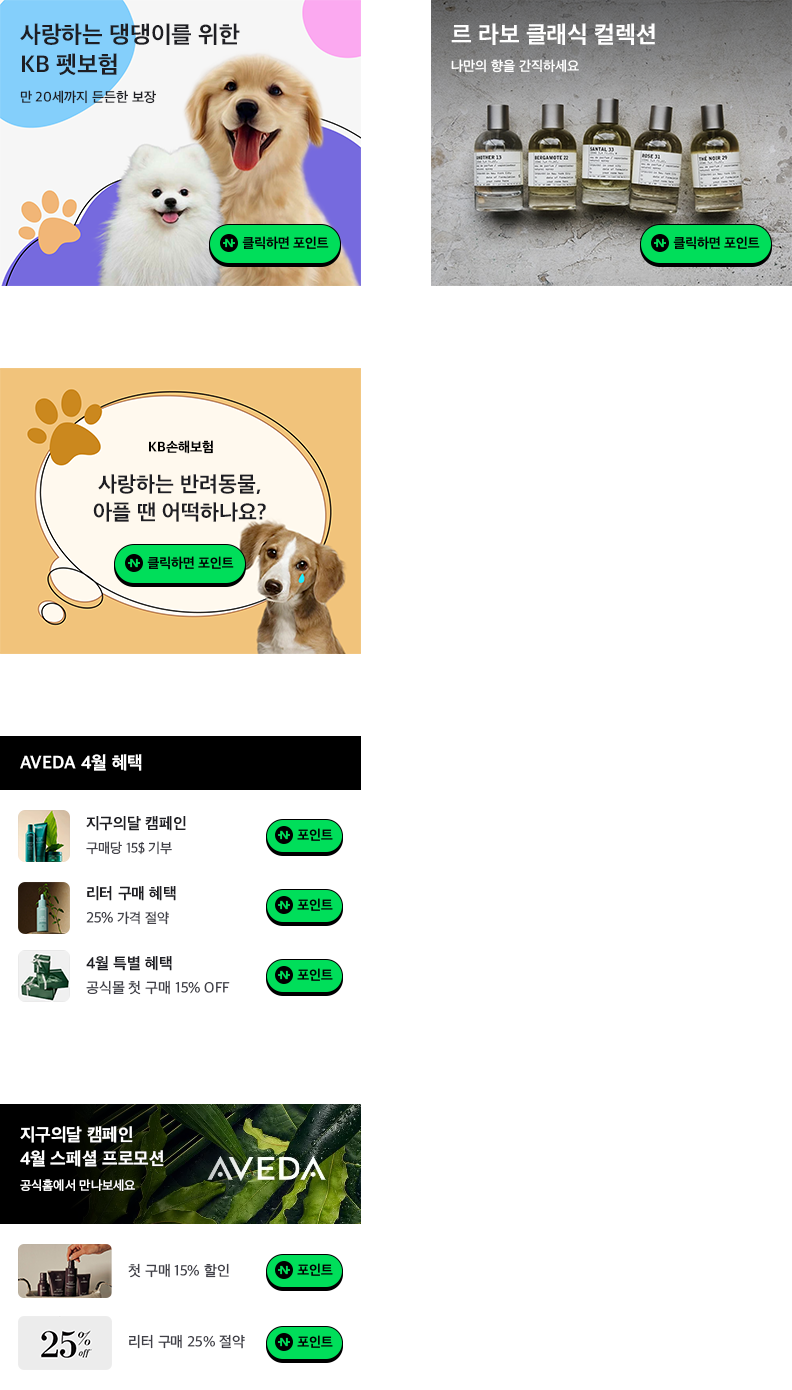
<style>
.page{position:relative;width:792px;height:1390px;background:#ffffff}
.page>*{position:absolute;margin:0}
.t1{font:24px/30px "AppleSDGothicNeo-Bold";color:#1e1e23}
.t2{font:24px "AppleSDGothicNeo-Bold";color:#ffffff}
.t3{font:14px "AppleSDGothicNeo-Medium";color:#ffffff}
.t4{font:14px "AppleSDGothicNeo-Medium";color:#1e1e23}
.t5{font:14px "AppleSDGothicNeo-Bold";color:#000000}
.t6{font:22px/28px "AppleSDGothicNeo-Bold";color:#1e1e23}
.t7{font:18px "AppleSDGothicNeo-Bold";color:#ffffff}
.t8{font:16px "AppleSDGothicNeo-Bold";color:#1e1e23}
.t9{font:14px "AppleSDGothicNeo-Regular";color:#404048}
.t10{font:15px "AppleSDGothicNeo-Regular";color:#404048}
.t11{font:18px/24px "AppleSDGothicNeo-Bold";color:#ffffff}
.t12{font:13px "AppleSDGothicNeo-Medium";color:#ffffff}
.t13{font:15px "AppleSDGothicNeo-Medium";color:#404048}
</style>
<div class="page">
<p class="t1" style="left:20px;top:23px;width:220px;height:52px">사랑하는 댕댕이를 위한<br>KB 펫보험</p>
<p class="t2" style="left:451px;top:23px;width:204px;height:22px">르 라보 클래식 컬렉션</p>
<p class="t3" style="left:451px;top:59px;width:128px;height:14px">나만의 향을 간직하세요</p>
<p class="t4" style="left:20px;top:90px;width:136px;height:14px">만 20세까지 든든한 보장</p>
<p class="t5" style="left:149px;top:440px;width:64px;height:14px">KB손해보험</p>
<p class="t6" style="left:93px;top:474px;width:173px;height:48px;text-align:center">사랑하는 반려동물,<br>아플 땐 어떡하나요?</p>
<p class="t7" style="left:20px;top:754px;width:122px;height:17px">AVEDA 4월 혜택</p>
<p class="t8" style="left:86px;top:816px;width:100px;height:15px">지구의달 캠페인</p>
<p class="t9" style="left:86px;top:841px;width:86px;height:14px">구매당 15$ 기부</p>
<p class="t8" style="left:87px;top:886px;width:89px;height:15px">리터 구매 혜택</p>
<p class="t9" style="left:86px;top:911px;width:83px;height:14px"><span class="t10">25%</span> 가격 절약</p>
<p class="t8" style="left:86px;top:956px;width:86px;height:15px">4월 특별 혜택</p>
<p class="t10" style="left:86px;top:980px;width:144px;height:15px">공식몰 첫 구매 15% OFF</p>
<p class="t11" style="left:20px;top:1126px;width:144px;height:41px">지구의달 캠페인<br>4월 스페셜 프로모션</p>
<p class="t12" style="left:20px;top:1179px;width:115px;height:12px">공식홈에서 만나보세요</p>
<p class="t13" style="left:128px;top:1263px;width:101px;height:15px">첫 구매 15% 할인</p>
<p class="t13" style="left:129px;top:1334px;width:116px;height:15px">리터 구매 25% 절약</p>
</div>
